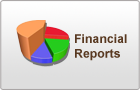
<style>
.page{position:relative;width:140px;height:90px}
.page>*{position:absolute;margin:0}
.t1{font:12.3px "Arial-BoldMT";color:#583820}
</style>
<div class="page">
<p class="t1" style="left:75px;top:34px;width:52px;height:27px">Financial<br>Reports</p>
</div>
